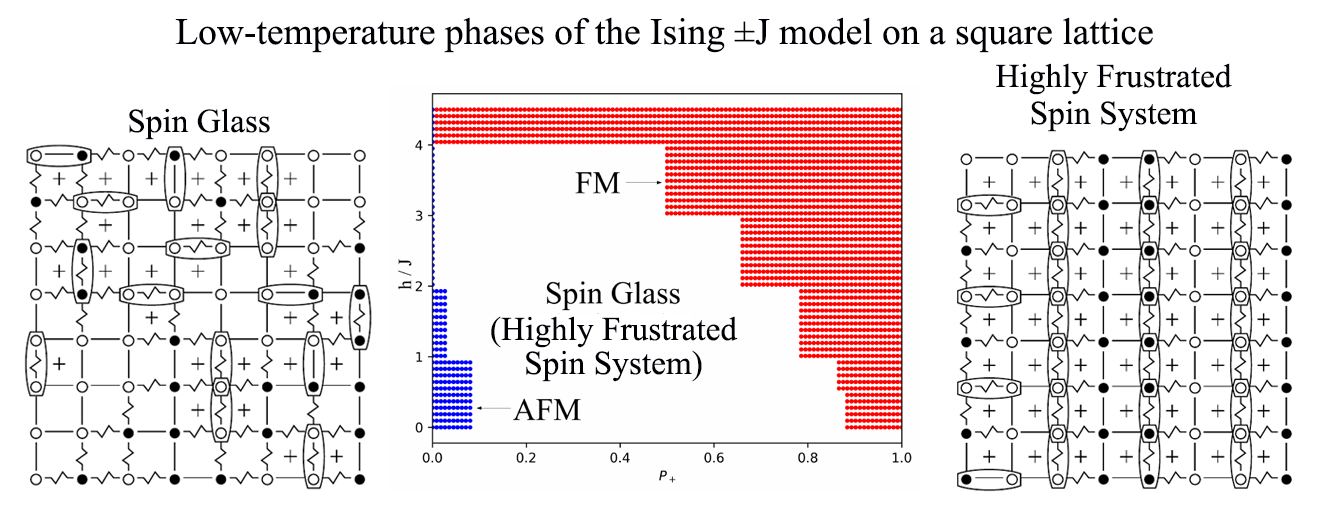
<style>
.page{position:relative;width:1328px;height:531px;background:#ffffff}
.page>*{position:absolute;margin:0}
.t1{font:37.5px "TimesNewRomanPSMT";color:#000106}
.t2{font:33.3px "TimesNewRomanPSMT";color:#000106}
</style>
<div class="page">
<p class="t1" style="left:175px;top:17px;width:978px;height:36px">Low-temperature phases of the Ising ±J model on a square lattice</p>
<p class="t2" style="left:996px;top:63px;width:236px;height:32px">Highly Frustrated</p>
<p class="t2" style="left:1031px;top:100px;width:167px;height:32px">Spin System</p>
<p class="t2" style="left:129px;top:108px;width:141px;height:32px">Spin Glass</p>
<p class="t2" style="left:491px;top:316px;width:247px;height:32px">(Highly Frustrated</p>
<p class="t2" style="left:526px;top:350px;width:176px;height:32px">Spin System)</p>
</div>
